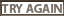
<style>
.page{position:relative;width:64px;height:16px;background:#ffffff}
.page>*{position:absolute;margin:0}
.t1{font:13px "MyriadPro-Bold";color:#7c736a;scale:0.95 1}
</style>
<div class="page">
<p class="t1" style="left:1px;top:4px;width:61px;height:9px">TRY AGAIN</p>
</div>
